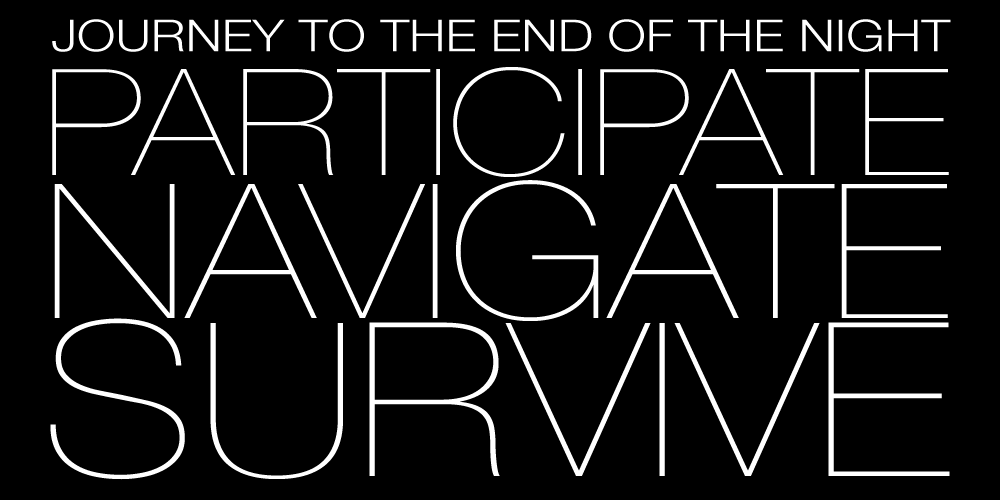
<style>
.page{position:relative;width:1000px;height:500px;background:#000000}
.page>*{position:absolute;margin:0}
.t1{font:44px "HelveticaNeue-Light";color:#ffffff;text-transform:uppercase;scale:1.18 1}
.t2{font:148.1px/174.2px "HelveticaNeue-UltraLight";color:#ffffff;scale:1.18 1}
.t3{font:188px/142.8px "HelveticaNeue-UltraLight";color:#ffffff;scale:1.18 1}
.t4{font:214.7px/158.5px "HelveticaNeue-UltraLight";color:#ffffff;scale:1.18 1}
</style>
<div class="page">
<p class="t1" style="left:52px;top:19px;width:899px;height:33px">Journey To The End Of The Night</p>
<p class="t2" style="left:50px;top:67px;width:900px;height:413px;text-align:center">PARTICIPATE<br><span class="t3">NAVIGATE<br></span><span class="t4">SURVIVE</span></p>
</div>
